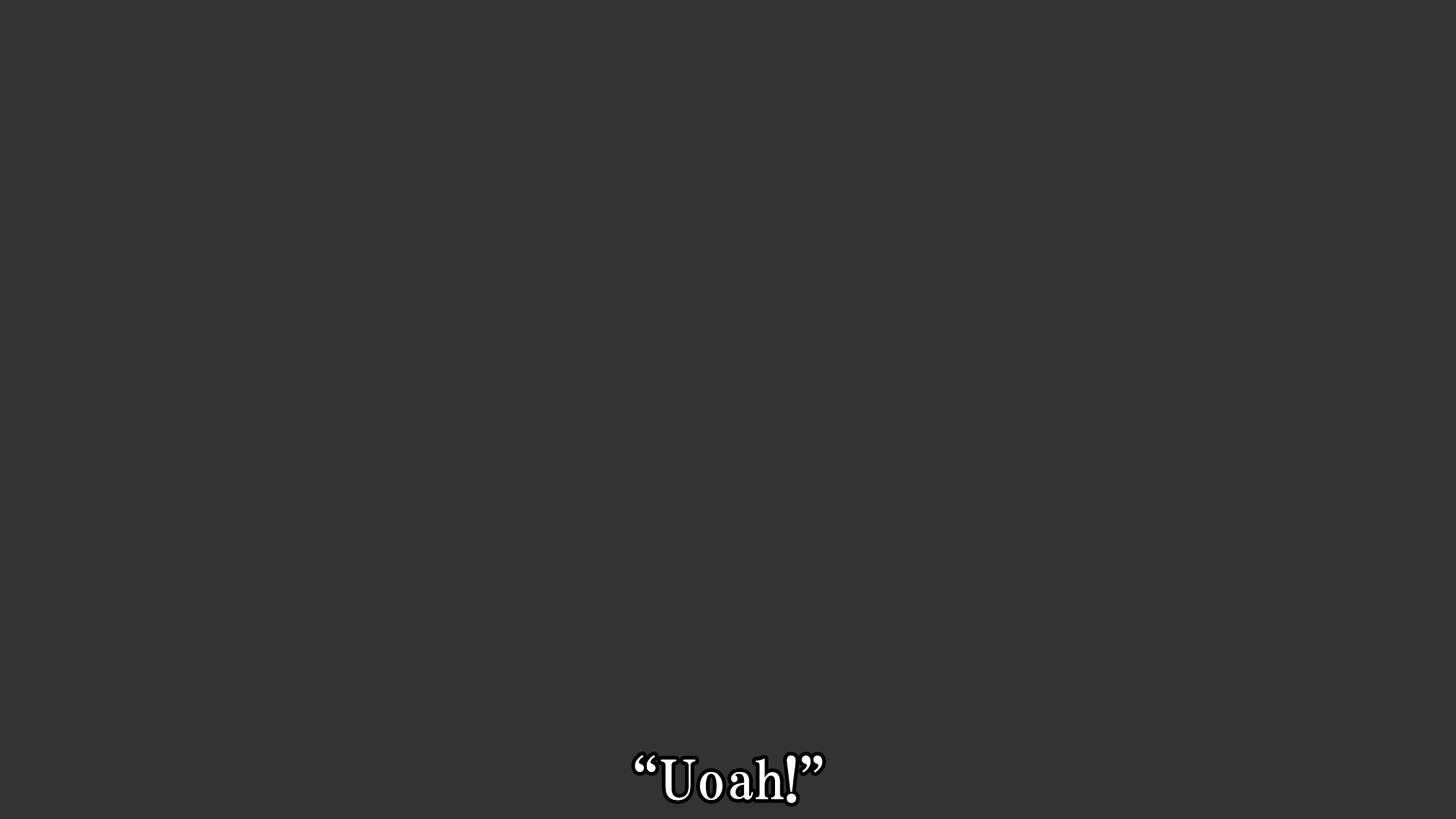
<style>
.page{position:relative;width:1456px;height:819px;background:#333333}
.page>*{position:absolute;margin:0}
.t1{font:53.1px "HGPMinchoE";letter-spacing:0.025em;color:#ffffff}
</style>
<div class="page">
<p class="t1" style="left:635px;top:755px;width:188px;height:48px">“Uoah!”</p>
</div>
